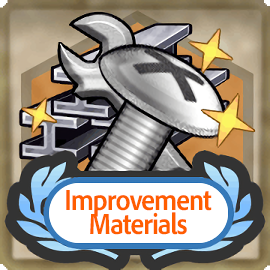
<style>
.page{position:relative;width:270px;height:270px}
.page>*{position:absolute;margin:0}
.t1{font:30px/24px "AdobeClean-Bold";letter-spacing:-0.04em;color:#ff5d00;scale:0.9 1}
</style>
<div class="page">
<p class="t1" style="left:66px;top:190px;width:146px;height:45px;text-align:center">Improvement<br>Materials</p>
</div>
